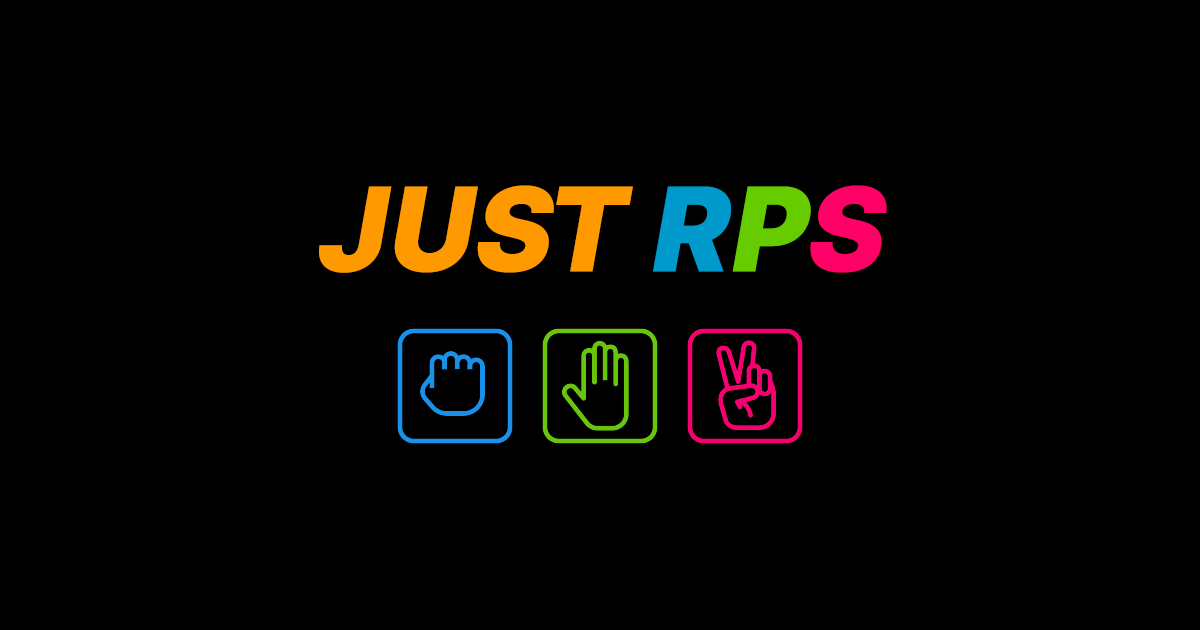
<style>
.page{position:relative;width:1200px;height:630px;background:#000000}
.page>*{position:absolute;margin:0}
.t1{font:120px "Pretendard-Black";color:#ff9900;font-style:italic}
.t2{font:120px "Pretendard-Black";color:#0099cc;font-style:italic}
.t3{font:120px "Pretendard-Black";color:#66cc00;font-style:italic}
.t4{font:120px "Pretendard-Black";color:#ff0066;font-style:italic}
</style>
<div class="page">
<p class="t1" style="left:319px;top:185px;width:568px;height:88px">JUST <span class="t2">R</span><span class="t3">P</span><span class="t4">S</span></p>
</div>
